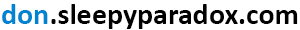
<style>
.page{position:relative;width:300px;height:30px;background:#ffffff}
.page>*{position:absolute;margin:0}
.t1{font:30px "Calibri-Bold";color:#000000}
.t2{font:30px "Calibri-Bold";color:#0084d1}
</style>
<div class="page">
<p class="t1" style="left:2px;top:4px;width:296px;height:25px"><span class="t2">don</span>.sleepyparadox.com</p>
</div>
